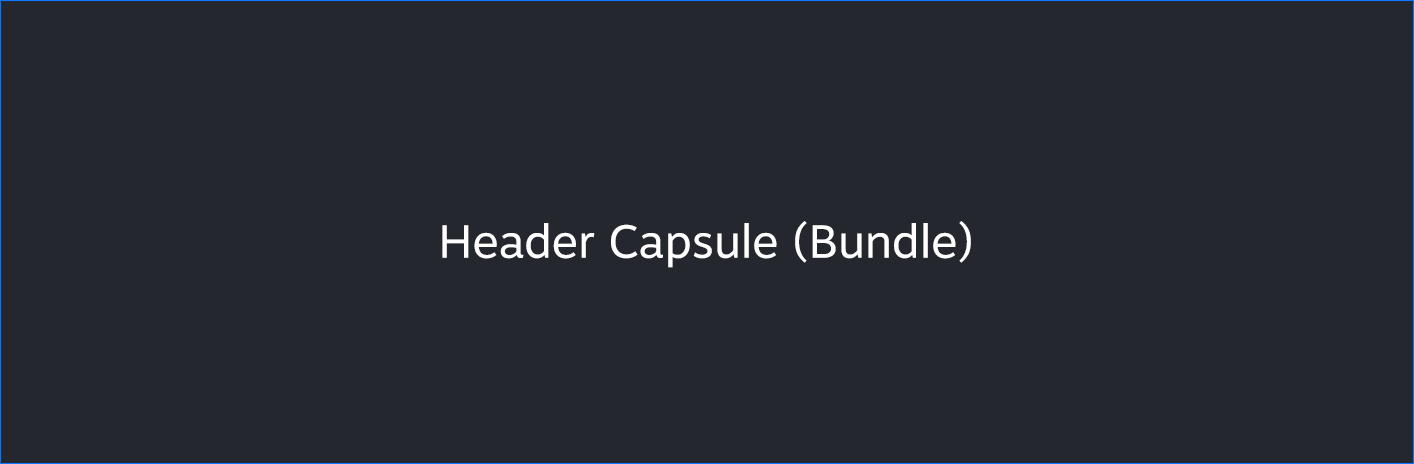
<style>
.page{position:relative;width:1414px;height:464px;background:#24282e}
.page>*{position:absolute;margin:0}
.t1{font:46.3px "MotivaSans-Regular";color:#ffffff}
</style>
<div class="page">
<p class="t1" style="left:442px;top:221px;width:529px;height:47px">Header Capsule (Bundle)</p>
</div>
